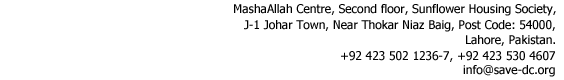
<style>
.page{position:relative;width:564px;height:80px;background:#ffffff}
.page>*{position:absolute;margin:0}
.t1{font:12px "Tahoma";color:#000000}
</style>
<div class="page">
<p class="t1" style="left:234px;top:4px;width:322px;height:12px">MashaAllah Centre, Second floor, Sunflower Housing Society,</p>
<p class="t1" style="left:244px;top:20px;width:311px;height:12px">J-1 Johar Town, Near Thokar Niaz Baig, Post Code: 54000,</p>
<p class="t1" style="left:466px;top:35px;width:89px;height:11px">Lahore, Pakistan.</p>
<p class="t1" style="left:341px;top:51px;width:214px;height:11px">+92 423 502 1236-7, +92 423 530 4607</p>
<p class="t1" style="left:463px;top:65px;width:92px;height:12px">info@save-dc.org</p>
</div>
